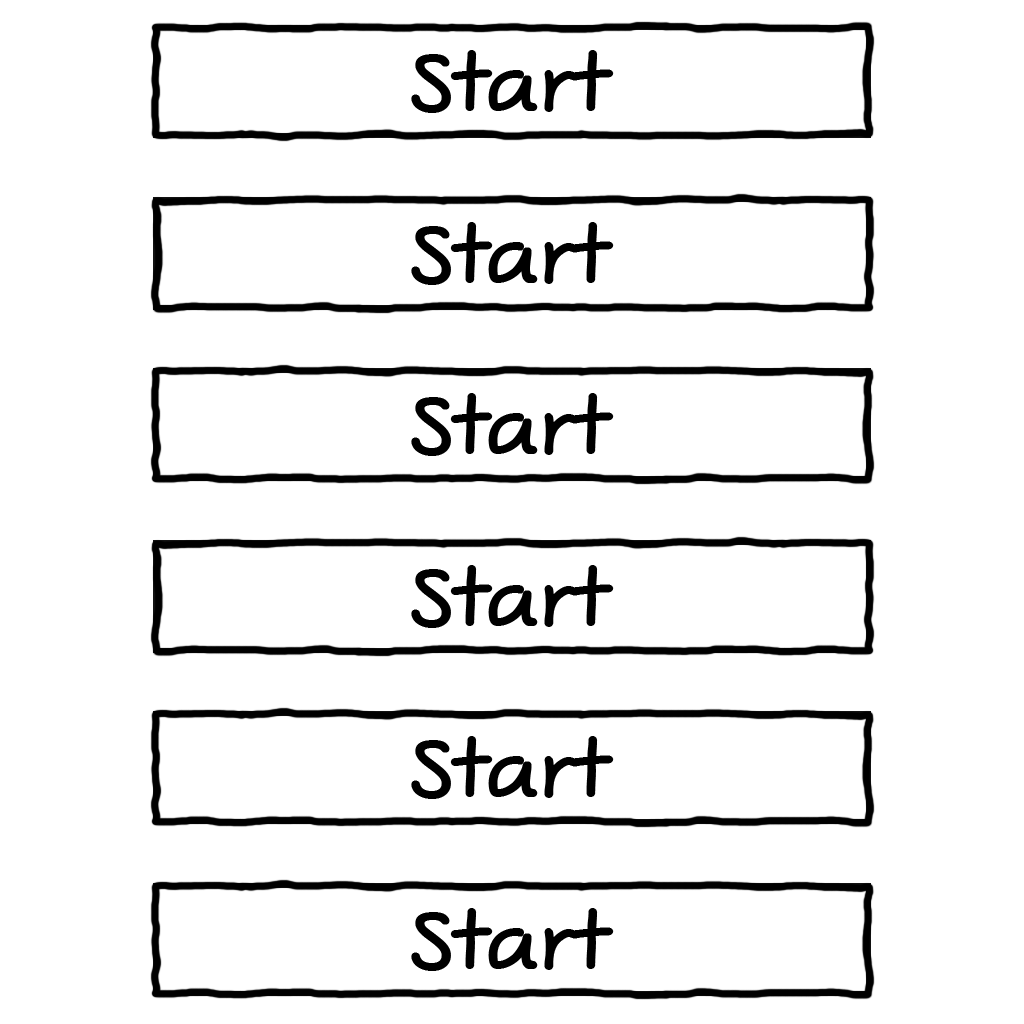
<style>
.page{position:relative;width:1024px;height:1024px;background:#ffffff}
.page>*{position:absolute;margin:0}
.t1{font:78.1px "ComicJensFreePro";color:#000000;scale:1.13 1}
</style>
<div class="page">
<p class="t1" style="left:411px;top:50px;width:203px;height:63px">Start</p>
<p class="t1" style="left:411px;top:222px;width:203px;height:63px">Start</p>
<p class="t1" style="left:411px;top:393px;width:203px;height:63px">Start</p>
<p class="t1" style="left:411px;top:565px;width:203px;height:63px">Start</p>
<p class="t1" style="left:411px;top:736px;width:203px;height:63px">Start</p>
<p class="t1" style="left:411px;top:908px;width:203px;height:63px">Start</p>
</div>
